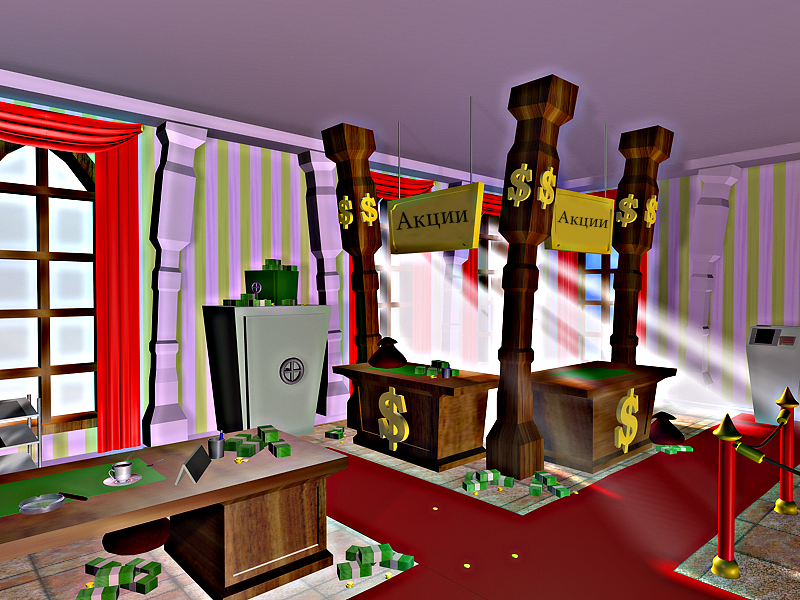
<style>
.page{position:relative;width:800px;height:600px}
.page>*{position:absolute;margin:0}
.t1{font:26px "MinionPro-Regular";color:#000100}
.t2{font:18px "MinionPro-Regular";color:#0a0a09}
</style>
<div class="page">
<p class="t1" style="left:396px;top:210px;width:73px;height:20px;rotate:-7deg">Акции</p>
<p class="t2" style="left:557px;top:210px;width:52px;height:19px;rotate:6deg">Акции</p>
</div>
